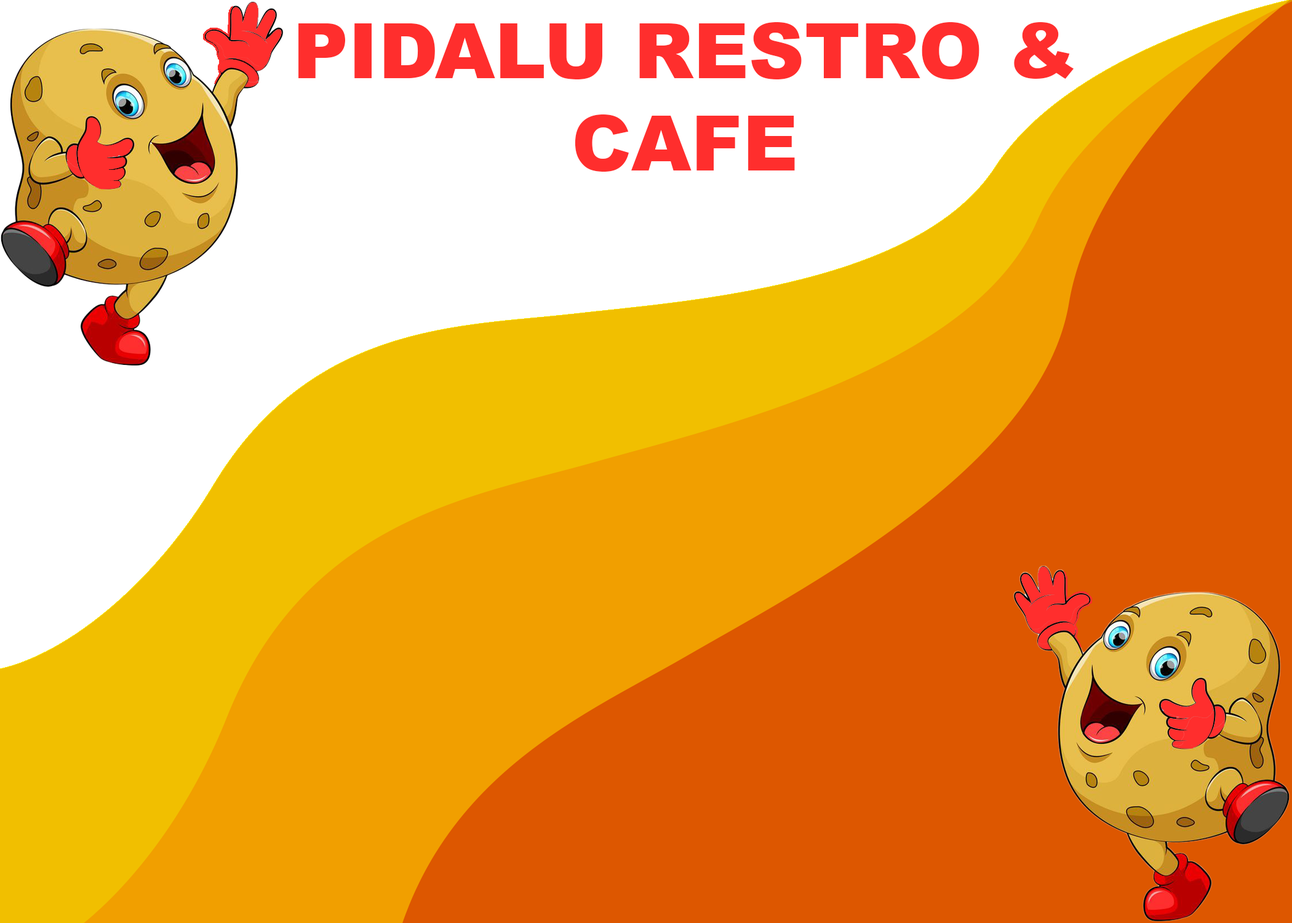
<style>
.page{position:relative;width:1292px;height:923px;background:#dd5700}
.page>*{position:absolute;margin:0}
.t1{font:76.9px "Arial-Black";color:#ff2e2d}
</style>
<div class="page">
<p class="t1" style="left:298px;top:22px;width:776px;height:150px;text-align:center">PIDALU RESTRO &amp; CAFE</p>
</div>
